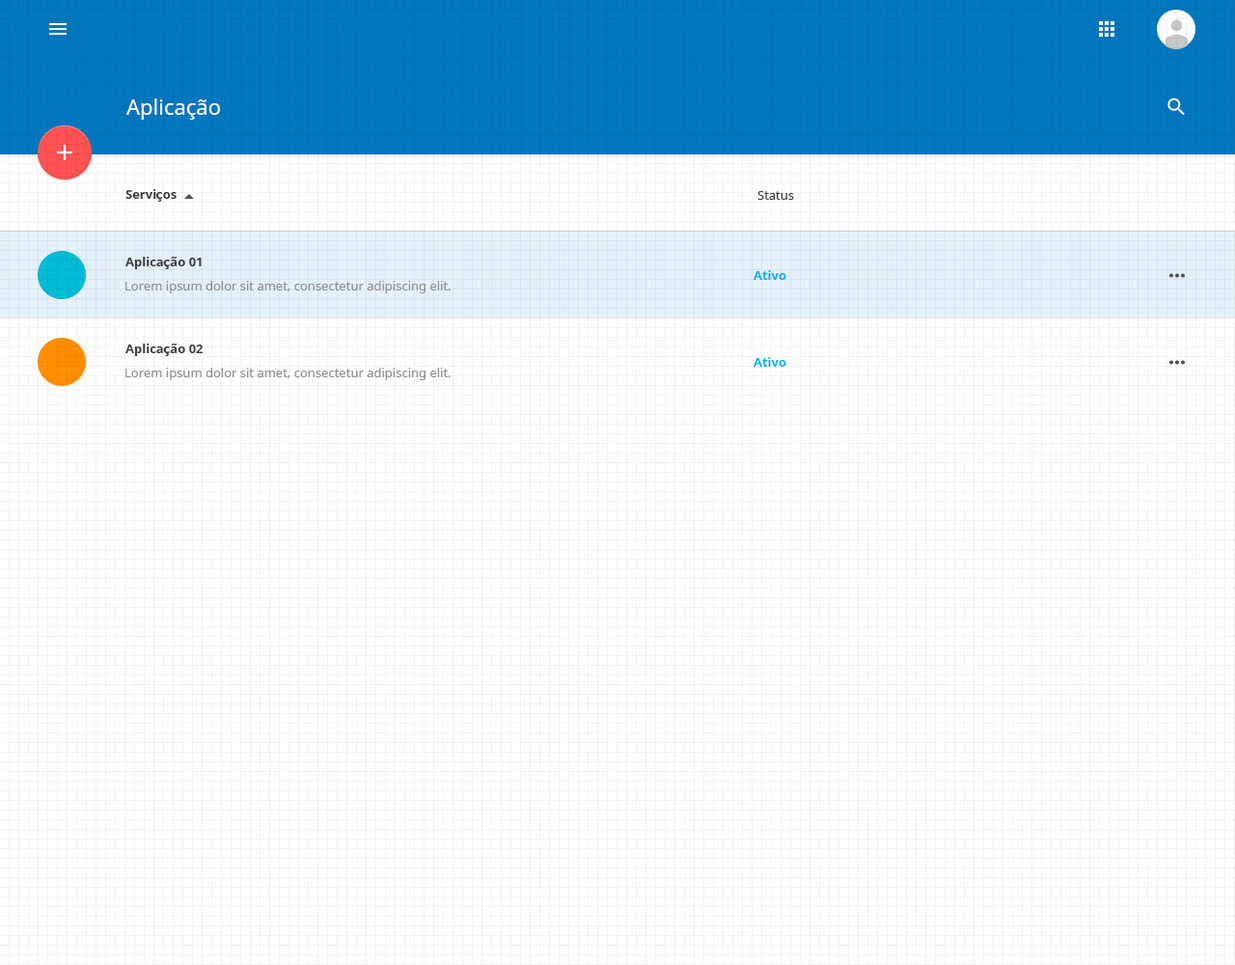
<style>
.page{position:relative;width:1235px;height:965px}
.page>*{position:absolute;margin:0}
.t1{font:21.2px "NotoSans";color:#ffffff}
.t2{font:12.5px "NotoSans-Bold";color:#3d3d3d}
.t3{font:12.5px "NotoSans";color:#3d3d3d}
.t4{font:12.5px "NotoSans";color:#929292}
.t5{font:12.5px "NotoSans-Bold";color:#00b0ff}
</style>
<div class="page">
<p class="t1" style="left:126px;top:98px;width:94px;height:22px">Aplicação</p>
<p class="t2" style="left:125px;top:189px;width:52px;height:13px">Serviços</p>
<p class="t3" style="left:758px;top:191px;width:36px;height:9px">Status</p>
<p class="t2" style="left:125px;top:257px;width:77px;height:12px">Aplicação 01</p>
<p class="t4" style="left:125px;top:281px;width:326px;height:12px">Lorem ipsum dolor sit amet, consectetur adipiscing elit.</p>
<p class="t5" style="left:754px;top:270px;width:33px;height:10px">Ativo</p>
<p class="t2" style="left:125px;top:344px;width:79px;height:12px">Aplicação 02</p>
<p class="t5" style="left:754px;top:357px;width:33px;height:10px">Ativo</p>
<p class="t4" style="left:125px;top:368px;width:326px;height:12px">Lorem ipsum dolor sit amet, consectetur adipiscing elit.</p>
</div>
